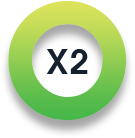
<style>
.page{position:relative;width:135px;height:138px;background:#ffffff}
.page>*{position:absolute;margin:0}
.t1{font:160.8px "AvantGardeITCbyBT-Demi";letter-spacing:0.04em}
.t2{font:35px "AvantGardeITCbyBT-Demi";letter-spacing:0.04em;color:#15212e}
</style>
<div class="page">
<p class="t1" style="left:8px;top:1px;width:118px;height:119px">O</p>
<p class="t2" style="left:46px;top:49px;width:42px;height:25px">X2</p>
</div>
